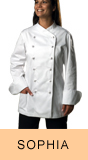
<style>
.page{position:relative;width:88px;height:160px;background:#ffffff}
.page>*{position:absolute;margin:0}
.t1{font:12px "ArialMT";letter-spacing:0.1em;color:#000000;text-transform:uppercase}
</style>
<div class="page">
<p class="t1" style="left:17px;top:140px;width:52px;height:10px">sophia</p>
</div>
